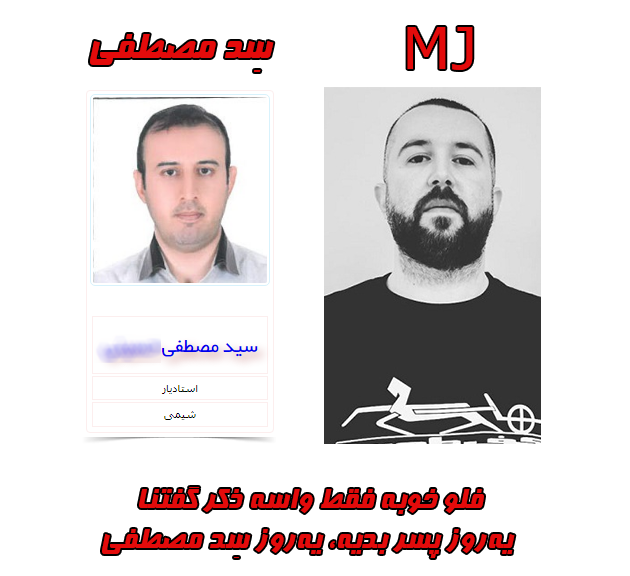
<style>
.page{position:relative;width:630px;height:576px;background:#ffffff}
.page>*{position:absolute;margin:0}
.t1{font:58.3px "MSReferenceSansSerif";color:#e30b0b}
.t2{font:41.7px "Far.Farnaz";color:#e30b0b}
.t3{font:33.3px "Far.Farnaz";color:#e30b0b}
</style>
<div class="page">
<p class="t1" style="left:407px;top:27px;width:66px;height:43px">MJ</p>
<p class="t2" style="left:90px;top:34px;width:184px;height:38px">سِد مصطفی</p>
<p class="t3" style="left:102px;top:487px;width:413px;height:71px;text-align:center">فلو خوبه فقط واسه ذکر گفتنا<br> یه‌روز پسر بدیه، یه‌روز سِد مصطفی</p>
</div>
